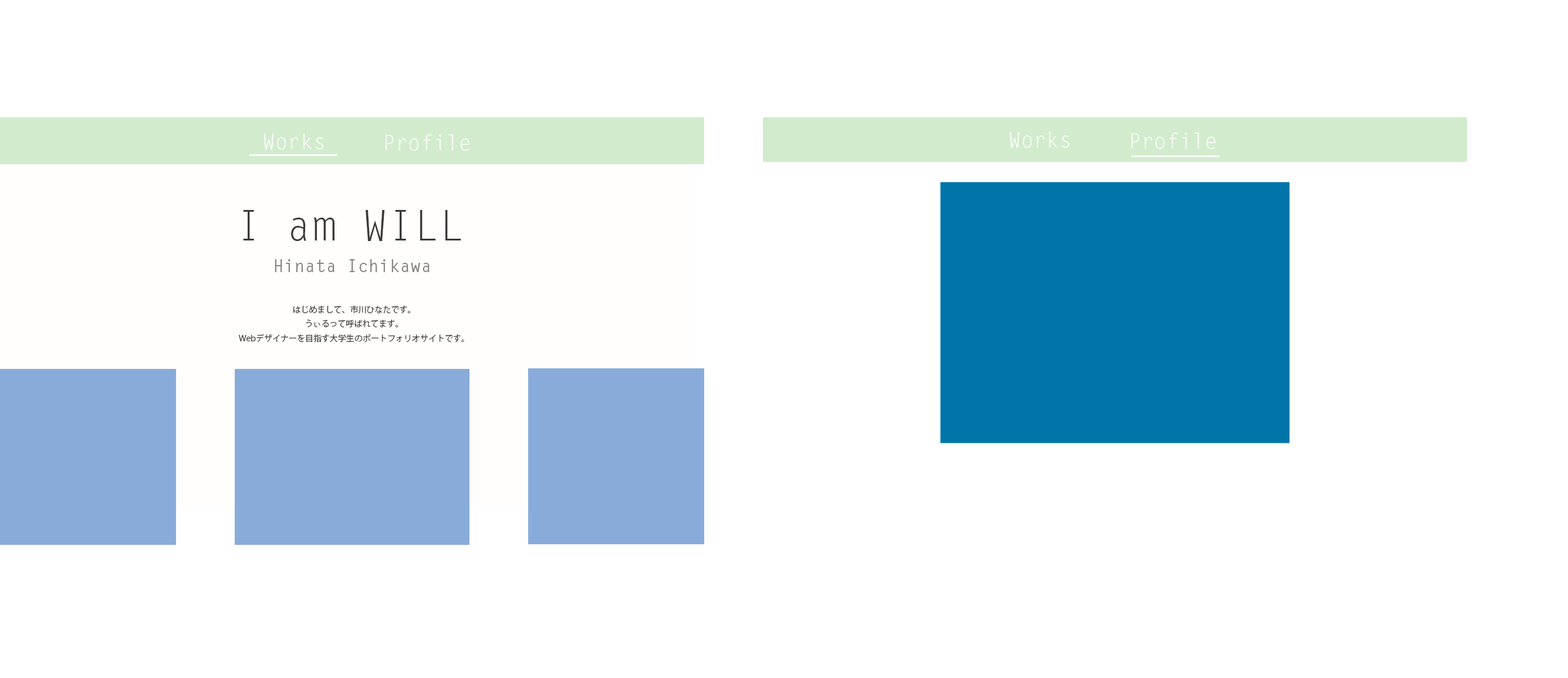
<style>
.page{position:relative;width:1568px;height:678px;background:#ffffff}
.page>*{position:absolute;margin:0}
.t1{font:21.1px "LetterGothicStd";color:#ffffff}
.t2{font:42.3px "LetterGothicStd";color:#393939}
.t3{font:17.6px "LetterGothicStd-Bold";color:#878686}
.t4{font:8.2px "KozGoPr6N-Regular";color:#393939}
</style>
<div class="page">
<p class="t1" style="left:264px;top:133px;width:59px;height:17px">Works</p>
<p class="t1" style="left:386px;top:134px;width:83px;height:17px">Profile</p>
<p class="t1" style="left:1010px;top:131px;width:59px;height:17px">Works</p>
<p class="t1" style="left:1131px;top:133px;width:84px;height:16px">Profile</p>
<p class="t2" style="left:243px;top:210px;width:218px;height:31px">I am WILL</p>
<p class="t3" style="left:275px;top:259px;width:155px;height:13px">Hinata Ichikawa</p>
<p class="t4" style="left:239px;top:306px;width:225px;height:37px;text-align:center">はじめまして、市川ひなたです。<br>うぃるって呼ばれてます。<br>Webデザイナーを目指す大学生のポートフォリオサイトです。</p>
</div>
